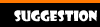
<style>
.page{position:relative;width:100px;height:27px;background:#000000}
.page>*{position:absolute;margin:0}
.t1{font:14px "ShowcardGothic-Reg";color:#ffffff}
</style>
<div class="page">
<p class="t1" style="left:14px;top:10px;width:83px;height:12px">suggestion</p>
</div>
